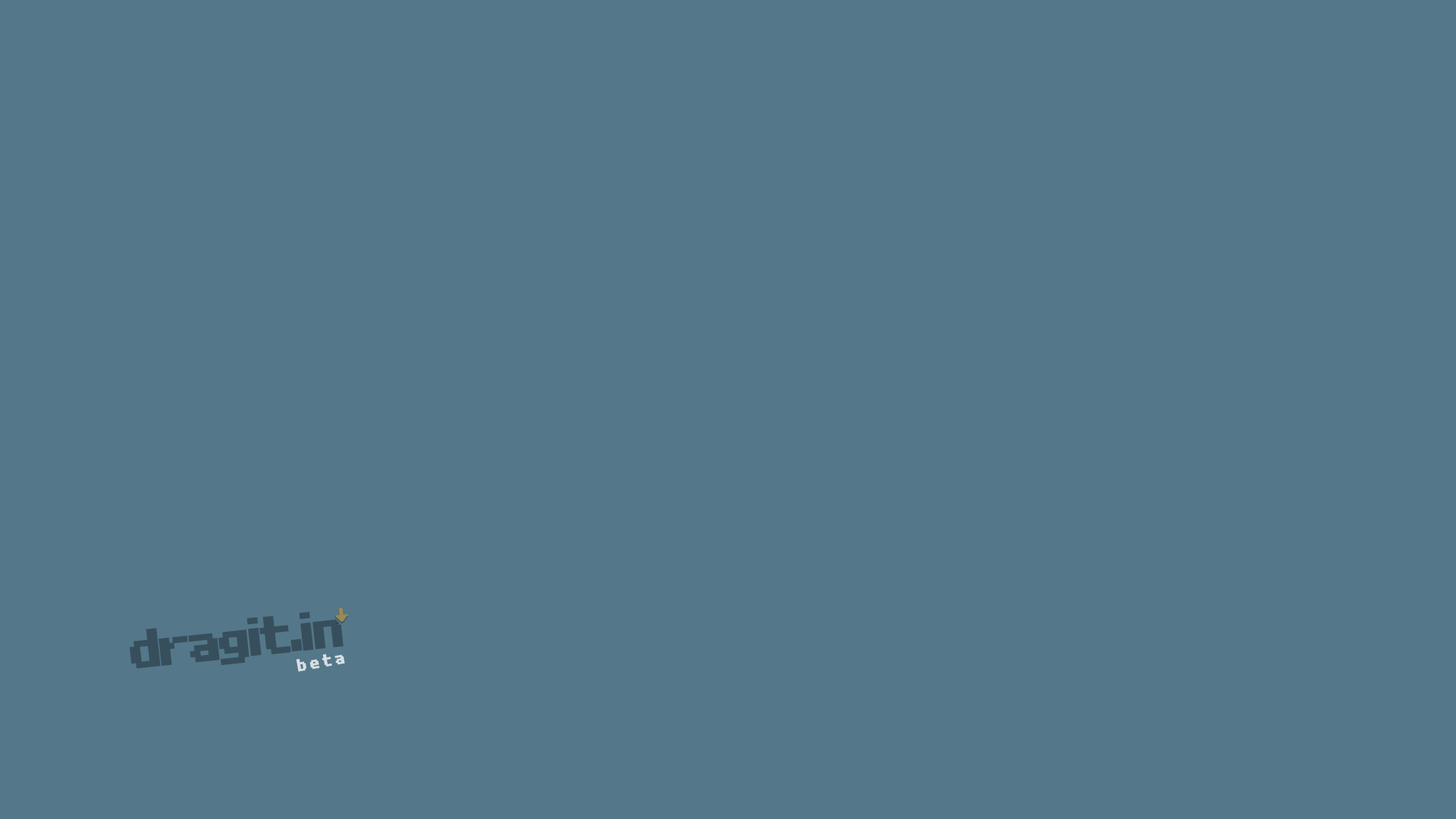
<style>
.page{position:relative;width:1456px;height:819px;background:#55778a}
.page>*{position:absolute;margin:0}
.t1{font:53px "RetroVilleNC";letter-spacing:-0.17em;color:#374f5c;font-weight:bold;scale:0.86 1}
.t2{font:53px "RetroVilleNC";letter-spacing:-0.17em;color:#374f5c;font-weight:bold;scale:0.85 1}
.t3{font:16.9px "RetroVilleNC";letter-spacing:0.13em;color:#d8e0e4;font-weight:bold;scale:0.79 1}
</style>
<div class="page">
<p class="t1" style="left:130px;top:612px;width:214px;height:57px;rotate:-6deg">dragit.<span class="t2">in</span></p>
<p class="t3" style="left:296px;top:654px;width:49px;height:18px;rotate:-10deg">beta</p>
</div>
